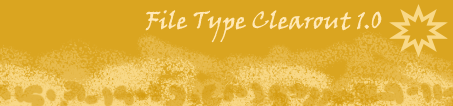
<style>
.page{position:relative;width:453px;height:106px;background:#daa520}
.page>*{position:absolute;margin:0}
.t1{font:24px "VinerHandITC";color:#ffe8b7}
</style>
<div class="page">
<p class="t1" style="left:145px;top:10px;width:237px;height:33px">File Type Clearout 1.0</p>
</div>
